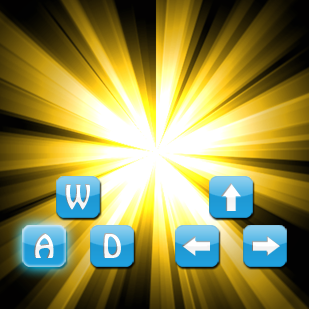
<style>
.page{position:relative;width:309px;height:309px}
.page>*{position:absolute;margin:0}
.t1{font:30px "HoboStd";color:#ffffff}
</style>
<div class="page">
<p class="t1" style="left:65px;top:184px;width:25px;height:26px">W</p>
<p class="t1" style="left:34px;top:233px;width:20px;height:25px">A</p>
<p class="t1" style="left:103px;top:233px;width:18px;height:25px">D</p>
</div>
